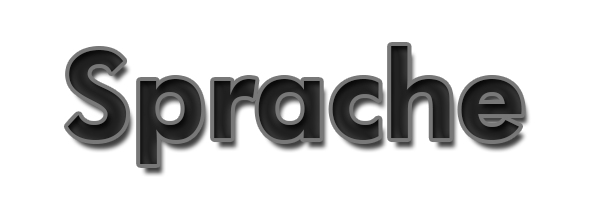
<style>
.page{position:relative;width:600px;height:200px;background:#ffffff}
.page>*{position:absolute;margin:0}
.t1{font:120px "FuturaBT-Heavy";color:#212121}
</style>
<div class="page">
<p class="t1" style="left:67px;top:46px;width:455px;height:118px">Sprache</p>
</div>
